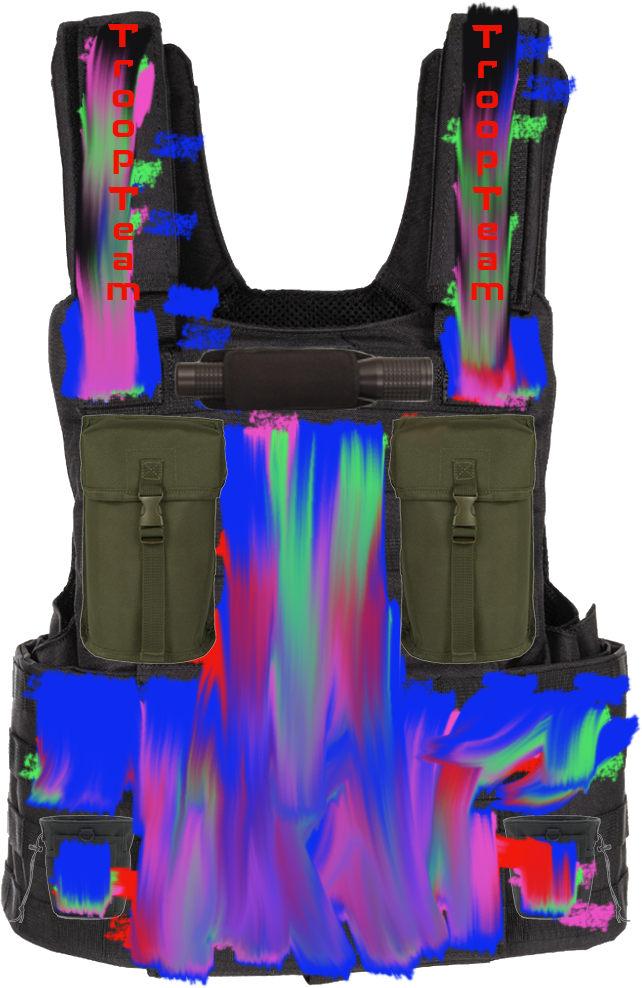
<style>
.page{position:relative;width:642px;height:988px;background:#ffffff}
.page>*{position:absolute;margin:0}
.t1{font:30px "RechargeRg-Bold";color:#ee1203}
</style>
<div class="page">
<p class="t1" style="left:107px;top:24px;width:33px;height:276px">Troop Team</p>
<p class="t1" style="left:471px;top:25px;width:33px;height:275px">Troop Team</p>
</div>
